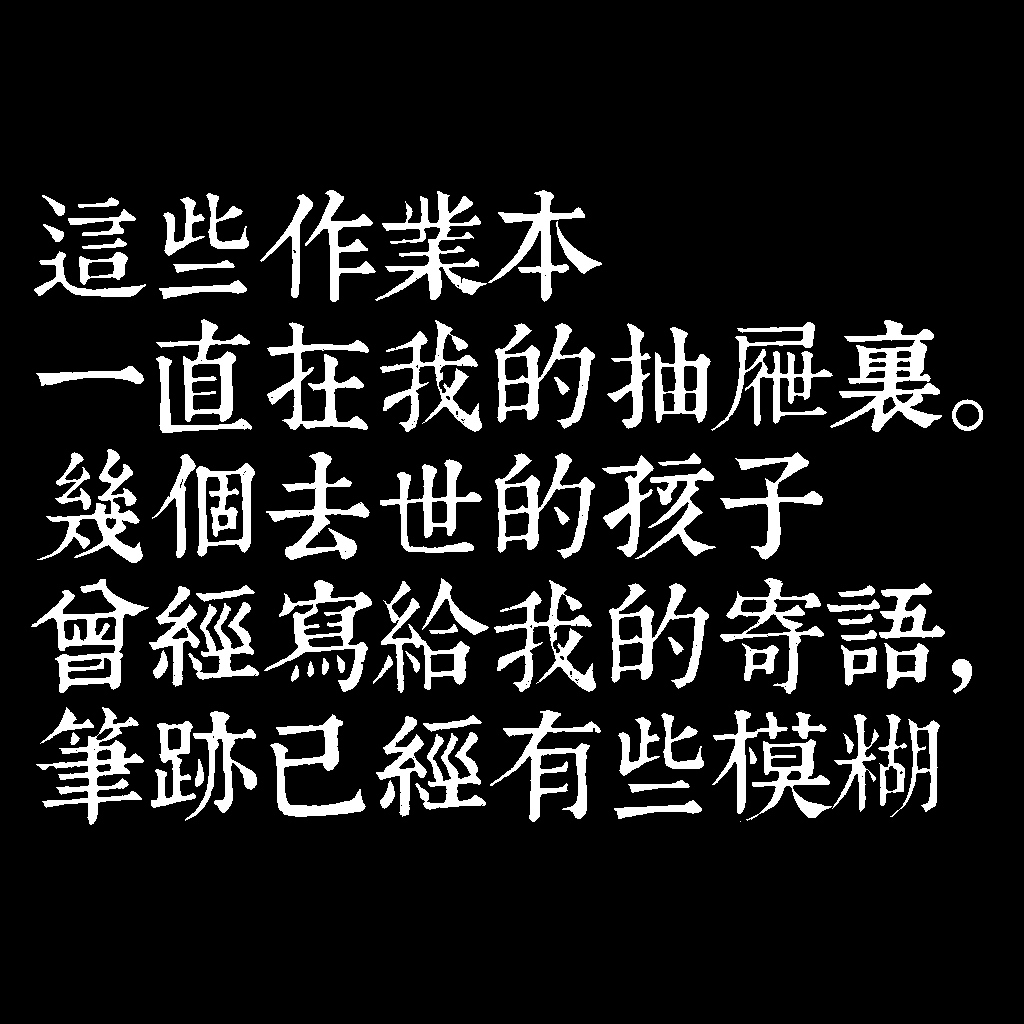
<style>
.page{position:relative;width:1024px;height:1024px;background:#000000}
.page>*{position:absolute;margin:0}
.t1{font:116px/130px "TpldKhangXiDictTrial";letter-spacing:-0.02em;color:#ffffff}
</style>
<div class="page">
<p class="t1" style="left:31px;top:190px;width:952px;height:635px">這些作業本<br>一直在我的抽屜裡。<br>幾個去世的孩子<br>曾經寫給我的寄語，<br>筆跡已經有些模糊</p>
</div>
